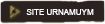
<style>
.page{position:relative;width:105px;height:24px;background:#2b2121}
.page>*{position:absolute;margin:0}
.t1{font:8px "ArialMT";color:#ffffff;text-transform:uppercase}
</style>
<div class="page">
<p class="t1" style="left:26px;top:9px;width:68px;height:6px">Site Urnamuym</p>
</div>
